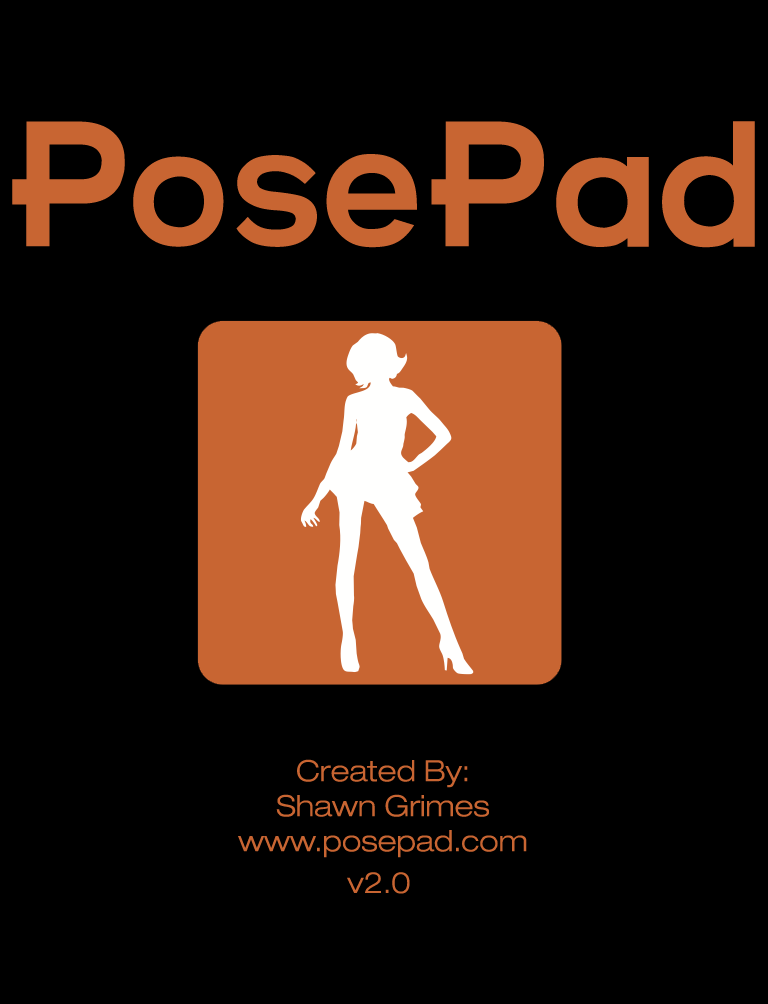
<style>
.page{position:relative;width:768px;height:1004px;background:#000000}
.page>*{position:absolute;margin:0}
.t1{font:150px "Futurama-Bold-Font";color:#c86532}
.t2{font:29.2px "Helvetica43-ExtendedLight";color:#c86532}
</style>
<div class="page">
<p class="t1" style="left:12px;top:121px;width:743px;height:127px">PosePad</p>
<p class="t2" style="left:238px;top:759px;width:289px;height:99px;text-align:center">Created By:<br>Shawn Grimes<br>www.posepad.com</p>
<p class="t2" style="left:347px;top:872px;width:63px;height:22px">v2.0</p>
</div>
